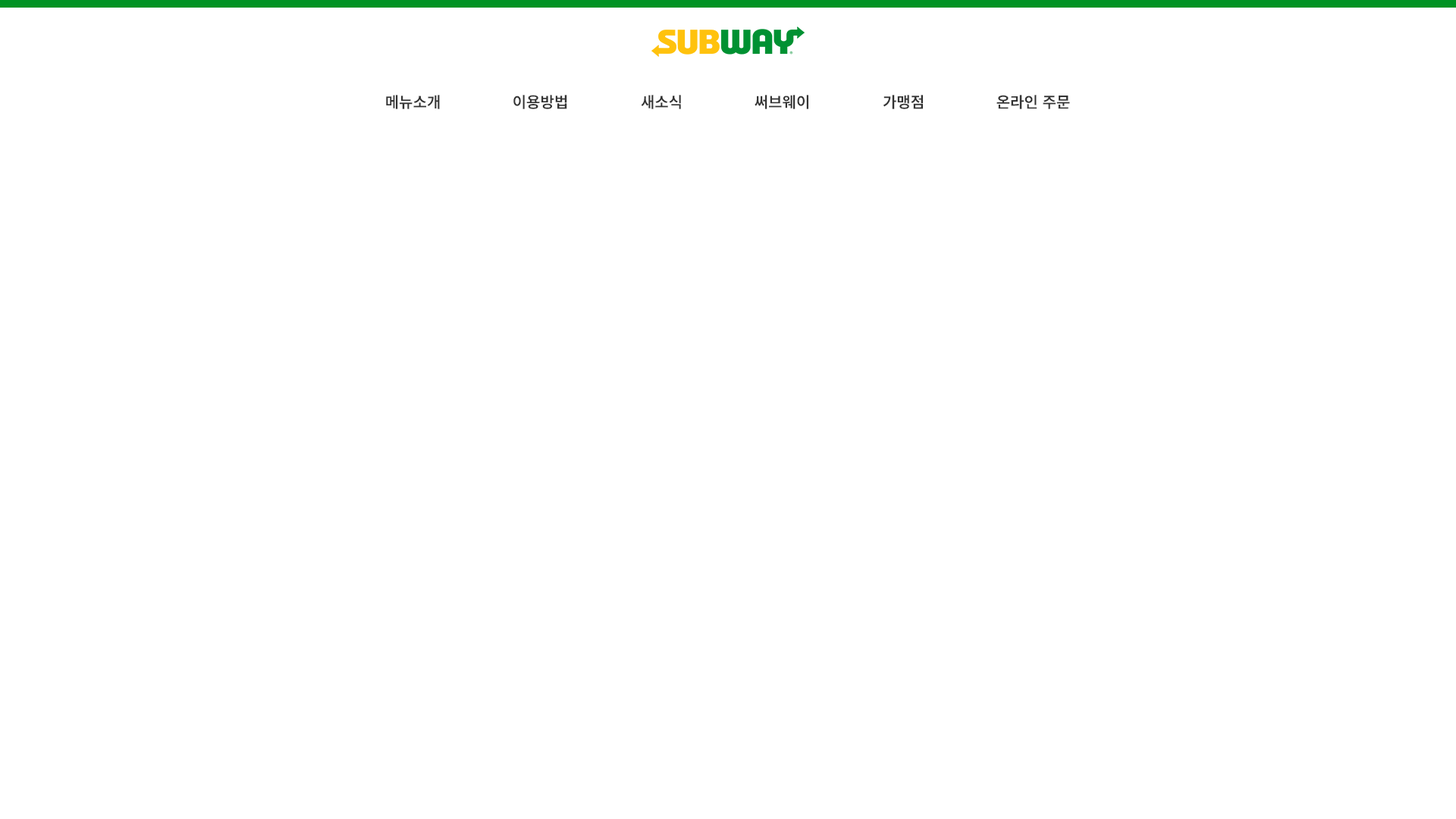
<style>
.page{position:relative;width:1456px;height:819px;background:#ffffff}
.page>*{position:absolute;margin:0}
.t1{font:15.2px "NotoSansKR-SemiBold";color:#333333}
</style>
<div class="page">
<p class="t1" style="left:386px;top:95px;width:54px;height:14px">메뉴소개</p>
<p class="t1" style="left:513px;top:95px;width:54px;height:14px">이용방법</p>
<p class="t1" style="left:641px;top:95px;width:40px;height:14px">새소식</p>
<p class="t1" style="left:755px;top:95px;width:53px;height:14px">써브웨이</p>
<p class="t1" style="left:883px;top:95px;width:40px;height:14px">가맹점</p>
<p class="t1" style="left:996px;top:95px;width:74px;height:14px">온라인 주문</p>
</div>
